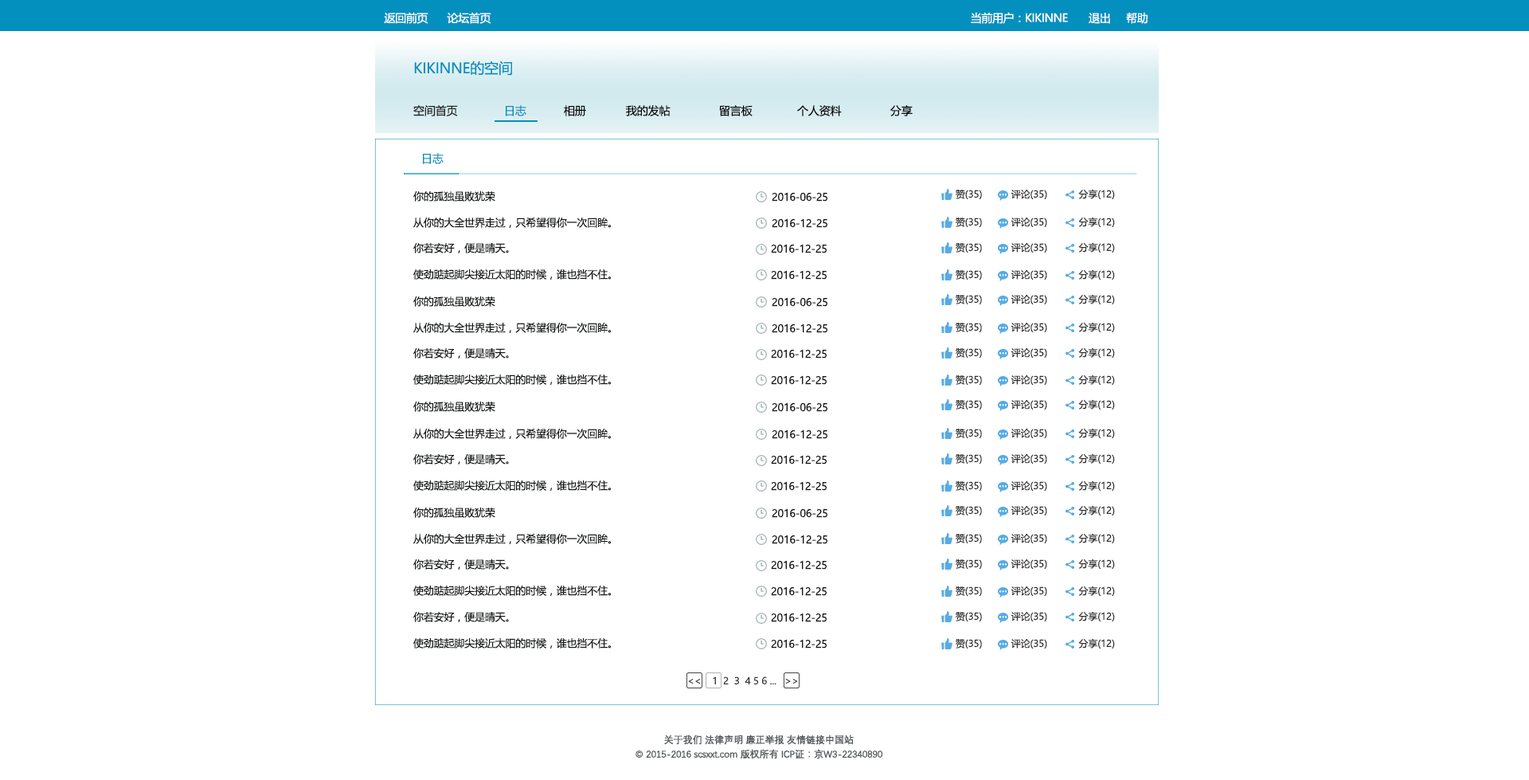
<style>
.page{position:relative;width:1529px;height:780px;background:#ffffff}
.page>*{position:absolute;margin:0}
.t1{font:11.2px "MicrosoftYaHei";letter-spacing:-0.025em;color:#ffffff}
.t2{font:14.3px "MicrosoftYaHei";letter-spacing:-0.01em;color:#0390bf}
.t3{font:11.2px "MicrosoftYaHei";letter-spacing:-0.01em;color:#1f2020}
.t4{font:11.2px "MicrosoftYaHei";letter-spacing:-0.01em;color:#0390bf}
.t5{font:11.2px "MicrosoftYaHei";letter-spacing:-0.01em;color:#040404}
.t6{font:10.4px "MicrosoftYaHei";letter-spacing:-0.01em;color:#131616}
.t7{font:9.5px "MicrosoftYaHei";letter-spacing:-0.01em;color:#2b2b2b}
.t8{font:9.6px "MicrosoftYaHei";letter-spacing:-0.01em;color:#38393a}
.t9{font:9.6px "MicrosoftYaHei";letter-spacing:-0.01em;color:#252626}
.t10{font:9.6px/14.3px "DengXian-Regular";letter-spacing:-0.025em;color:#545a5c;font-weight:bold}
</style>
<div class="page">
<p class="t1" style="left:384px;top:12px;width:45px;height:12px">返回前页</p>
<p class="t1" style="left:447px;top:12px;width:44px;height:12px">论坛首页</p>
<p class="t1" style="left:971px;top:12px;width:97px;height:12px">当前用户：KIKINNE</p>
<p class="t1" style="left:1089px;top:13px;width:21px;height:11px">退出</p>
<p class="t1" style="left:1126px;top:12px;width:22px;height:12px">帮助</p>
<p class="t2" style="left:414px;top:61px;width:98px;height:15px">KIKINNE的空间</p>
<p class="t3" style="left:413px;top:105px;width:45px;height:11px">空间首页</p>
<p class="t4" style="left:506px;top:105px;width:20px;height:11px">日志</p>
<p class="t5" style="left:564px;top:105px;width:22px;height:11px">相册</p>
<p class="t5" style="left:626px;top:105px;width:45px;height:11px">我的发帖</p>
<p class="t5" style="left:719px;top:105px;width:34px;height:11px">留言板</p>
<p class="t5" style="left:797px;top:105px;width:45px;height:11px">个人资料</p>
<p class="t5" style="left:890px;top:105px;width:23px;height:11px">分享</p>
<p class="t4" style="left:423px;top:153px;width:21px;height:11px">日志</p>
<p class="t6" style="left:413px;top:191px;width:82px;height:11px">你的孤独虽败犹荣</p>
<p class="t6" style="left:772px;top:192px;width:56px;height:10px">2016-06-25</p>
<p class="t7" style="left:956px;top:190px;width:26px;height:9px">赞(35)</p>
<p class="t7" style="left:1011px;top:190px;width:36px;height:9px">评论(35)</p>
<p class="t7" style="left:1078px;top:189px;width:37px;height:10px">分享(12)</p>
<p class="t6" style="left:413px;top:217px;width:199px;height:11px">从你的大全世界走过，只希望得你一次回眸。</p>
<p class="t6" style="left:772px;top:218px;width:56px;height:10px">2016-12-25</p>
<p class="t7" style="left:956px;top:217px;width:26px;height:10px">赞(35)</p>
<p class="t7" style="left:1011px;top:217px;width:36px;height:10px">评论(35)</p>
<p class="t7" style="left:1078px;top:217px;width:37px;height:10px">分享(12)</p>
<p class="t6" style="left:413px;top:243px;width:96px;height:10px">你若安好，便是晴天。</p>
<p class="t6" style="left:771px;top:244px;width:57px;height:9px">2016-12-25</p>
<p class="t7" style="left:956px;top:243px;width:26px;height:9px">赞(35)</p>
<p class="t7" style="left:1011px;top:243px;width:36px;height:9px">评论(35)</p>
<p class="t7" style="left:1078px;top:242px;width:37px;height:10px">分享(12)</p>
<p class="t6" style="left:413px;top:269px;width:199px;height:11px">使劲踮起脚尖接近太阳的时候，谁也挡不住。</p>
<p class="t7" style="left:1078px;top:269px;width:37px;height:11px">分享(12)</p>
<p class="t6" style="left:771px;top:270px;width:57px;height:10px">2016-12-25</p>
<p class="t7" style="left:956px;top:270px;width:26px;height:10px">赞(35)</p>
<p class="t7" style="left:1011px;top:270px;width:36px;height:10px">评论(35)</p>
<p class="t7" style="left:1078px;top:294px;width:37px;height:10px">分享(12)</p>
<p class="t6" style="left:413px;top:296px;width:82px;height:11px">你的孤独虽败犹荣</p>
<p class="t6" style="left:772px;top:297px;width:56px;height:10px">2016-06-25</p>
<p class="t7" style="left:956px;top:295px;width:26px;height:9px">赞(35)</p>
<p class="t7" style="left:1011px;top:295px;width:36px;height:9px">评论(35)</p>
<p class="t6" style="left:413px;top:323px;width:199px;height:10px">从你的大全世界走过，只希望得你一次回眸。</p>
<p class="t6" style="left:772px;top:323px;width:56px;height:10px">2016-12-25</p>
<p class="t7" style="left:956px;top:323px;width:26px;height:9px">赞(35)</p>
<p class="t7" style="left:1011px;top:323px;width:36px;height:9px">评论(35)</p>
<p class="t7" style="left:1078px;top:322px;width:37px;height:10px">分享(12)</p>
<p class="t6" style="left:413px;top:348px;width:96px;height:10px">你若安好，便是晴天。</p>
<p class="t6" style="left:771px;top:349px;width:57px;height:9px">2016-12-25</p>
<p class="t7" style="left:956px;top:348px;width:26px;height:10px">赞(35)</p>
<p class="t7" style="left:1011px;top:348px;width:36px;height:10px">评论(35)</p>
<p class="t7" style="left:1078px;top:347px;width:37px;height:11px">分享(12)</p>
<p class="t6" style="left:413px;top:374px;width:199px;height:11px">使劲踮起脚尖接近太阳的时候，谁也挡不住。</p>
<p class="t6" style="left:771px;top:375px;width:57px;height:10px">2016-12-25</p>
<p class="t7" style="left:956px;top:375px;width:26px;height:10px">赞(35)</p>
<p class="t7" style="left:1011px;top:375px;width:36px;height:10px">评论(35)</p>
<p class="t7" style="left:1078px;top:374px;width:37px;height:11px">分享(12)</p>
<p class="t6" style="left:413px;top:401px;width:82px;height:11px">你的孤独虽败犹荣</p>
<p class="t7" style="left:956px;top:400px;width:26px;height:9px">赞(35)</p>
<p class="t7" style="left:1011px;top:400px;width:36px;height:9px">评论(35)</p>
<p class="t7" style="left:1078px;top:399px;width:37px;height:10px">分享(12)</p>
<p class="t6" style="left:772px;top:402px;width:56px;height:10px">2016-06-25</p>
<p class="t6" style="left:413px;top:429px;width:199px;height:10px">从你的大全世界走过，只希望得你一次回眸。</p>
<p class="t6" style="left:772px;top:429px;width:56px;height:10px">2016-12-25</p>
<p class="t7" style="left:956px;top:429px;width:26px;height:9px">赞(35)</p>
<p class="t7" style="left:1011px;top:429px;width:36px;height:9px">评论(35)</p>
<p class="t7" style="left:1078px;top:428px;width:37px;height:10px">分享(12)</p>
<p class="t6" style="left:413px;top:454px;width:96px;height:10px">你若安好，便是晴天。</p>
<p class="t6" style="left:771px;top:455px;width:57px;height:9px">2016-12-25</p>
<p class="t7" style="left:956px;top:454px;width:26px;height:10px">赞(35)</p>
<p class="t7" style="left:1011px;top:454px;width:36px;height:10px">评论(35)</p>
<p class="t7" style="left:1078px;top:453px;width:37px;height:11px">分享(12)</p>
<p class="t6" style="left:413px;top:480px;width:199px;height:11px">使劲踮起脚尖接近太阳的时候，谁也挡不住。</p>
<p class="t6" style="left:771px;top:481px;width:57px;height:10px">2016-12-25</p>
<p class="t7" style="left:956px;top:481px;width:26px;height:10px">赞(35)</p>
<p class="t7" style="left:1011px;top:481px;width:36px;height:10px">评论(35)</p>
<p class="t7" style="left:1078px;top:480px;width:37px;height:11px">分享(12)</p>
<p class="t6" style="left:413px;top:507px;width:82px;height:11px">你的孤独虽败犹荣</p>
<p class="t6" style="left:772px;top:508px;width:56px;height:10px">2016-06-25</p>
<p class="t7" style="left:956px;top:506px;width:26px;height:9px">赞(35)</p>
<p class="t7" style="left:1011px;top:506px;width:36px;height:9px">评论(35)</p>
<p class="t7" style="left:1078px;top:505px;width:37px;height:10px">分享(12)</p>
<p class="t6" style="left:413px;top:534px;width:199px;height:10px">从你的大全世界走过，只希望得你一次回眸。</p>
<p class="t7" style="left:956px;top:534px;width:26px;height:9px">赞(35)</p>
<p class="t7" style="left:1011px;top:534px;width:36px;height:9px">评论(35)</p>
<p class="t7" style="left:1078px;top:533px;width:37px;height:10px">分享(12)</p>
<p class="t6" style="left:772px;top:534px;width:56px;height:10px">2016-12-25</p>
<p class="t6" style="left:413px;top:559px;width:96px;height:10px">你若安好，便是晴天。</p>
<p class="t6" style="left:771px;top:560px;width:57px;height:9px">2016-12-25</p>
<p class="t7" style="left:956px;top:559px;width:26px;height:10px">赞(35)</p>
<p class="t7" style="left:1011px;top:559px;width:36px;height:10px">评论(35)</p>
<p class="t7" style="left:1078px;top:558px;width:37px;height:11px">分享(12)</p>
<p class="t6" style="left:413px;top:585px;width:199px;height:11px">使劲踮起脚尖接近太阳的时候，谁也挡不住。</p>
<p class="t6" style="left:771px;top:586px;width:57px;height:10px">2016-12-25</p>
<p class="t7" style="left:956px;top:586px;width:26px;height:10px">赞(35)</p>
<p class="t7" style="left:1011px;top:586px;width:36px;height:10px">评论(35)</p>
<p class="t7" style="left:1078px;top:585px;width:37px;height:11px">分享(12)</p>
<p class="t6" style="left:413px;top:612px;width:96px;height:10px">你若安好，便是晴天。</p>
<p class="t6" style="left:771px;top:612px;width:57px;height:10px">2016-12-25</p>
<p class="t7" style="left:956px;top:612px;width:26px;height:9px">赞(35)</p>
<p class="t7" style="left:1011px;top:612px;width:36px;height:9px">评论(35)</p>
<p class="t7" style="left:1078px;top:611px;width:37px;height:10px">分享(12)</p>
<p class="t6" style="left:413px;top:638px;width:199px;height:10px">使劲踮起脚尖接近太阳的时候，谁也挡不住。</p>
<p class="t6" style="left:771px;top:639px;width:57px;height:9px">2016-12-25</p>
<p class="t7" style="left:956px;top:639px;width:26px;height:9px">赞(35)</p>
<p class="t7" style="left:1011px;top:639px;width:36px;height:9px">评论(35)</p>
<p class="t7" style="left:1078px;top:638px;width:37px;height:10px">分享(12)</p>
<p class="t8" style="left:688px;top:676px;width:110px;height:9px">&lt;&lt;    1  2 <span class="t9"> 3</span>  4 5 6 ...   &gt;&gt;</p>
<p class="t10" style="left:636px;top:734px;width:247px;height:25px;text-align:center">关于我们 法律声明 廉正举报 友情链接中国站<br>© 2015-2016 scsxxt.com 版权所有 ICP证：京W3-22340890</p>
</div>
